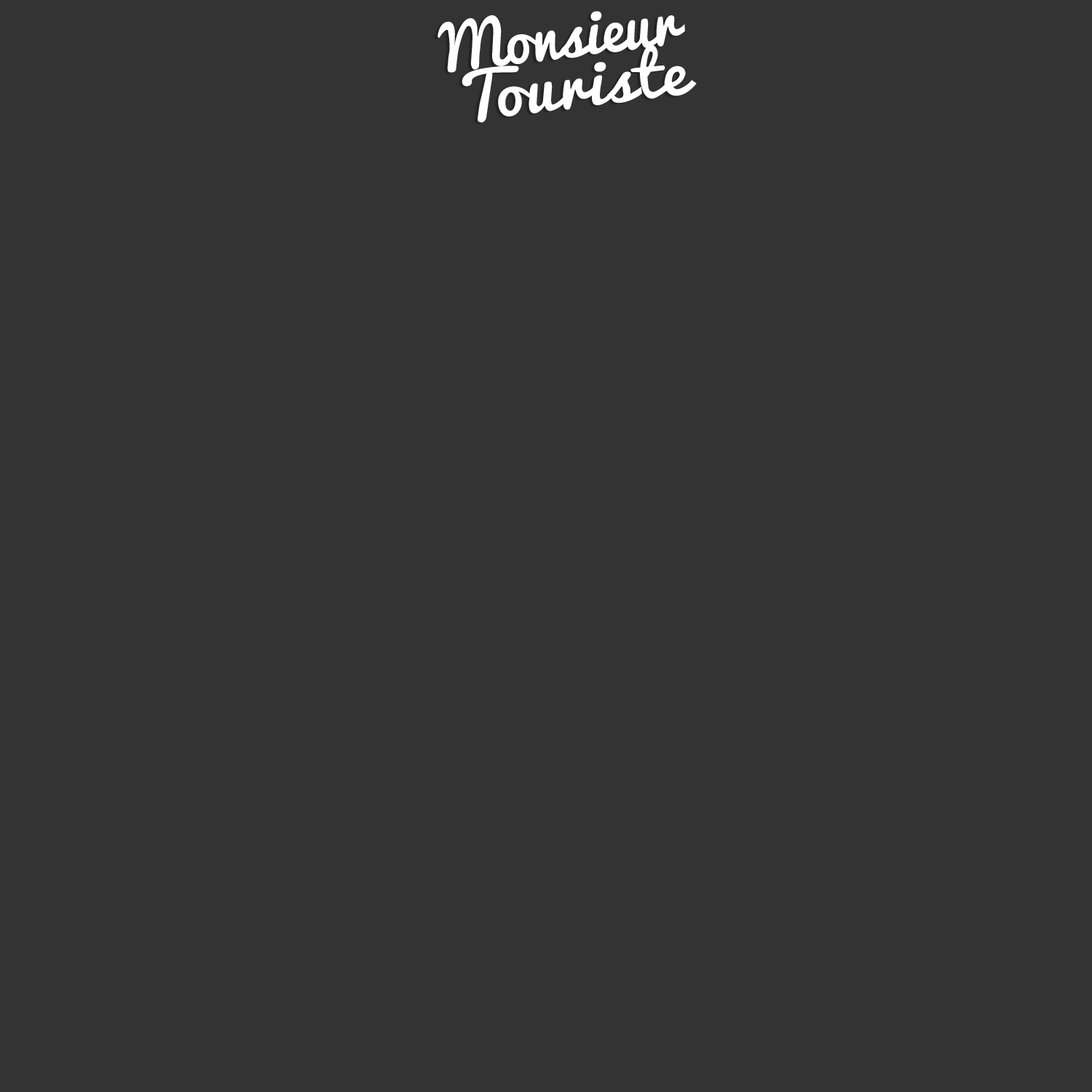
<style>
.page{position:relative;width:1092px;height:1092px;background:#333333}
.page>*{position:absolute;margin:0}
.t1{font:61.2px/51px "Pacifico";color:#ffffff}
.t2{font:61.2px/51px "Pacifico";letter-spacing:0.025em;color:#ffffff;scale:1.08 1}
</style>
<div class="page">
<p class="t1" style="left:438px;top:11px;width:259px;height:112px;rotate:-7deg">Monsieur<br> <span class="t2">Touriste</span></p>
</div>
